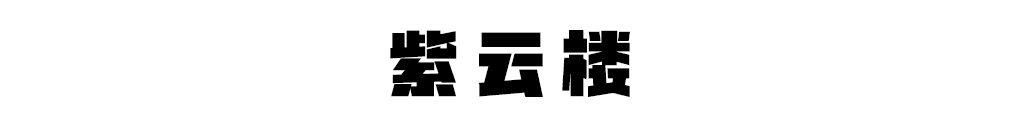
<style>
.page{position:relative;width:1024px;height:128px;background:#ffffff}
.page>*{position:absolute;margin:0}
.t1{font:71.8px "AaJiJiaHei";letter-spacing:0.2em;color:#000000}
</style>
<div class="page">
<p class="t1" style="left:390px;top:30px;width:240px;height:67px">紫云楼</p>
</div>
